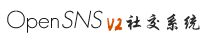
<style>
.page{position:relative;width:202px;height:40px;background:#ffffff}
.page>*{position:absolute;margin:0}
.t1{font:24px "GeosansLight";color:#171717}
.t2{font:24px "GeosansLight";color:#171717;font-style:italic}
.t3{font:19.2px "-G-s-k-a-0-0-h";color:#272727}
.t4{font:19.2px "-";color:#d55101}
</style>
<div class="page">
<p class="t1" style="left:7px;top:10px;width:96px;height:23px">Open<span class="t2">SNS</span></p>
<p class="t3" style="left:126px;top:13px;width:74px;height:18px">社交系统</p>
<p class="t4" style="left:107px;top:18px;width:16px;height:13px">v2</p>
</div>
